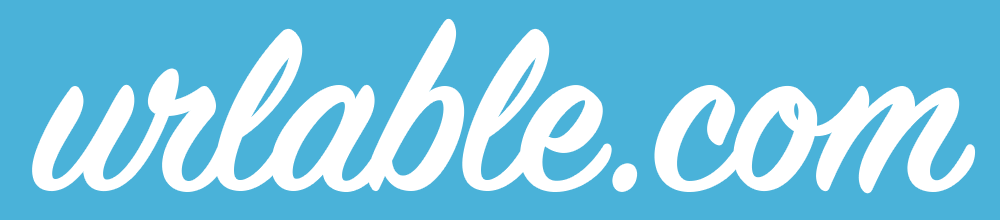
<style>
.page{position:relative;width:1000px;height:220px;background:#4ab2d9}
.page>*{position:absolute;margin:0}
.t1{font:250px "SignPainter-HouseScript";color:#ffffff}
</style>
<div class="page">
<p class="t1" style="left:34px;top:20px;width:940px;height:172px">urlable.com</p>
</div>
